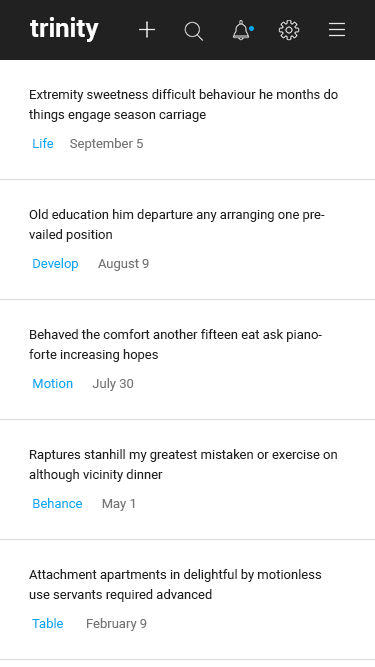
<style>
.page{position:relative;width:375px;height:667px;background:#ffffff}
.page>*{position:absolute;margin:0}
.t1{font:26px "Roboto-Bold";color:#ffffff}
.t2{font:13px/20px "Roboto-Regular";color:#212121}
.t3{font:13px "Roboto-Regular";color:#757575}
.t4{font:13px "Roboto-Regular";color:#03a9f4}
</style>
<div class="page">
<p class="t1" style="left:30px;top:17px;width:69px;height:25px">trinity</p>
<p class="t2" style="left:29px;top:89px;width:309px;height:33px">Extremity sweetness difficult behaviour he months do things engage season carriage</p>
<p class="t3" style="left:33px;top:138px;width:110px;height:13px"><span class="t4"> Life     </span>September 5</p>
<p class="t2" style="left:29px;top:209px;width:296px;height:33px">Old education him departure any arranging one prevailed position</p>
<p class="t3" style="left:33px;top:258px;width:116px;height:13px"><span class="t4"> Develop      </span>August 9</p>
<p class="t2" style="left:29px;top:329px;width:293px;height:33px">Behaved the comfort another fifteen eat ask pianoforte increasing hopes</p>
<p class="t3" style="left:33px;top:378px;width:101px;height:13px"><span class="t4"> Motion      </span>July 30</p>
<p class="t2" style="left:29px;top:449px;width:308px;height:33px">Raptures stanhill my greatest mistaken or exercise on although vicinity dinner</p>
<p class="t4" style="left:33px;top:498px;width:102px;height:13px">Behance      <span class="t3">May 1</span></p>
<p class="t2" style="left:29px;top:569px;width:293px;height:33px">Attachment apartments in delightful by motionless use servants required advanced</p>
<p class="t3" style="left:32px;top:618px;width:115px;height:13px"><span class="t4"> Table       </span>February 9</p>
</div>
